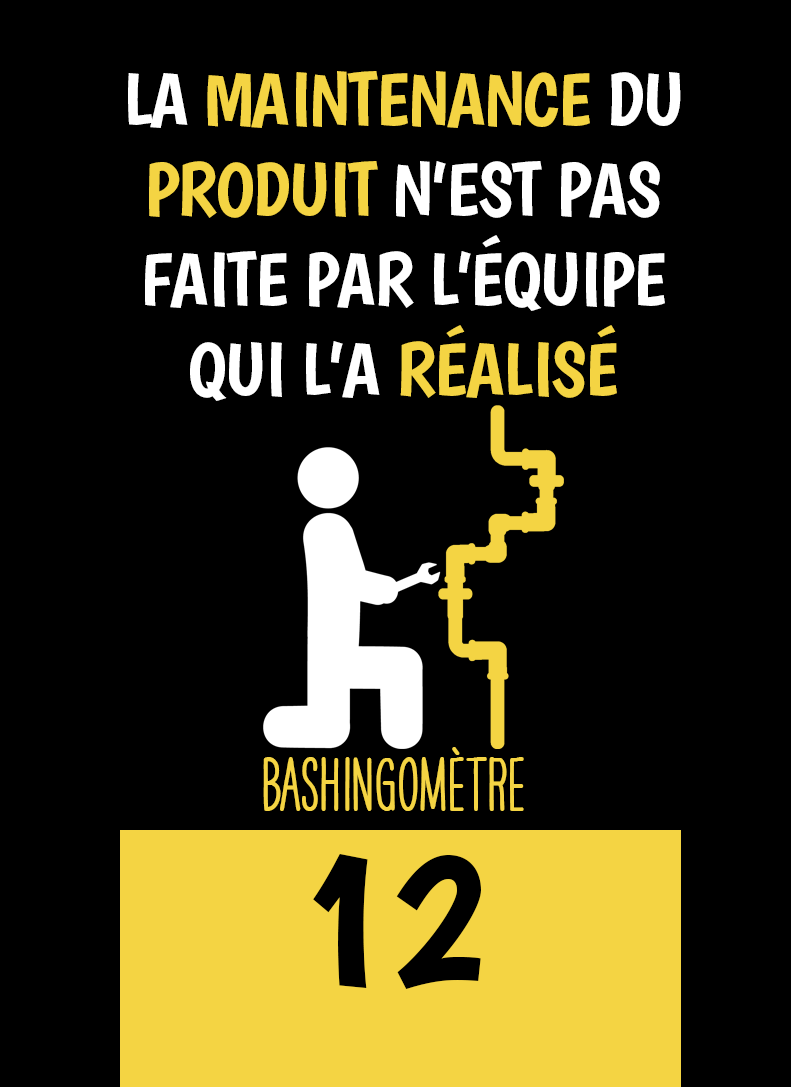
<style>
.page{position:relative;width:791px;height:1087px;background:#000000}
.page>*{position:absolute;margin:0}
.t1{font:75px "Boogaloo-Regular";letter-spacing:-0.02em;color:#ffffff}
.t2{font:75px "Boogaloo-Regular";letter-spacing:-0.02em;color:#f4d443}
.t3{font:66.7px "HAVEANICEDAYTallW04-Bold";color:#f4d443}
.t4{font:200px "Boogaloo-Regular";color:#000000}
</style>
<div class="page">
<p class="t1" style="left:128px;top:71px;width:553px;height:330px;text-align:center">LA <span class="t2">MAINTENANCE</span> DU <span class="t2">PRODUIT</span> N’EST PAS FAITE PAR L’ÉQUIPE QUI L’A <span class="t2">RÉALISÉ</span></p>
<p class="t3" style="left:263px;top:747px;width:261px;height:64px">BASHINgomètre</p>
<p class="t4" style="left:313px;top:854px;width:168px;height:135px">12</p>
</div>
